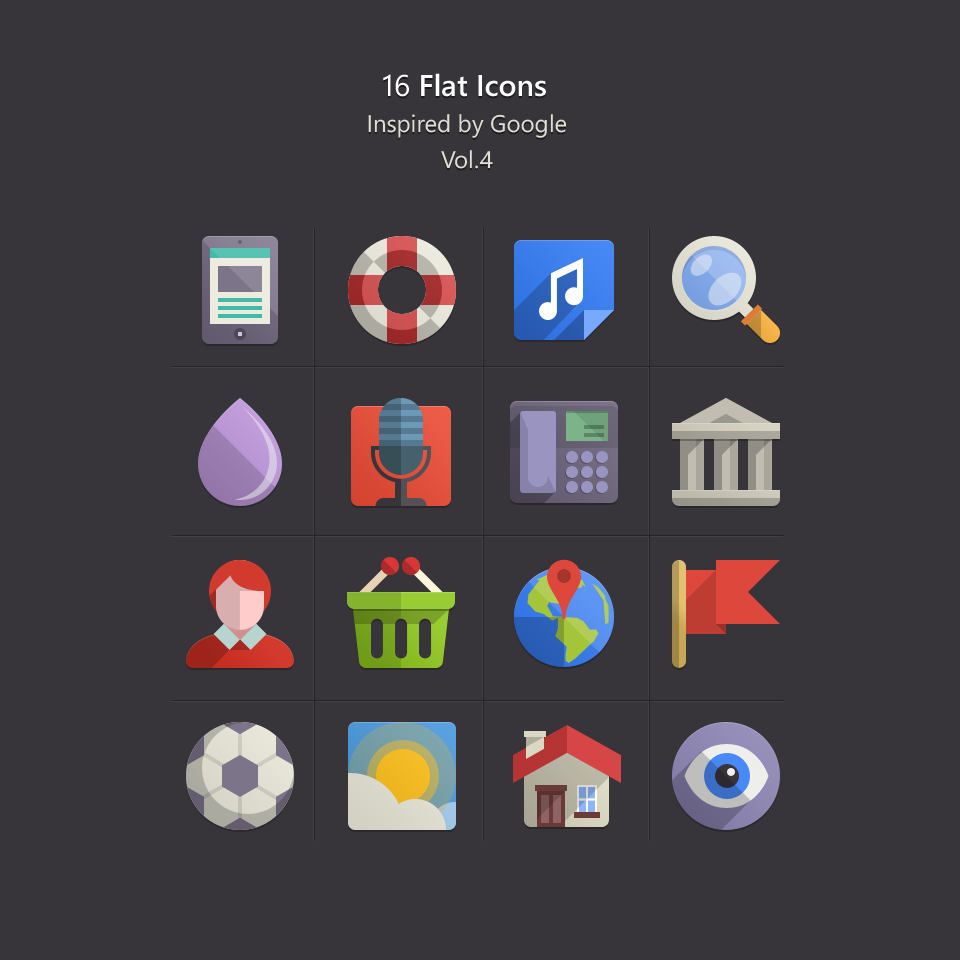
<style>
.page{position:relative;width:960px;height:960px;background:#37353a}
.page>*{position:absolute;margin:0}
.t1{font:24px/36px "SegoeWP";color:#e0dfd6}
.t2{font:30px/36px "SegoeWP";color:#ffffff}
.t3{font:30px/36px "SegoeWP-Semibold";color:#ffffff}
</style>
<div class="page">
<p class="t1" style="left:368px;top:73px;width:199px;height:96px;text-align:center"><span class="t2">16</span><span class="t3"> Flat Icons<br></span>Inspired by Google<br>Vol.4</p>
</div>
